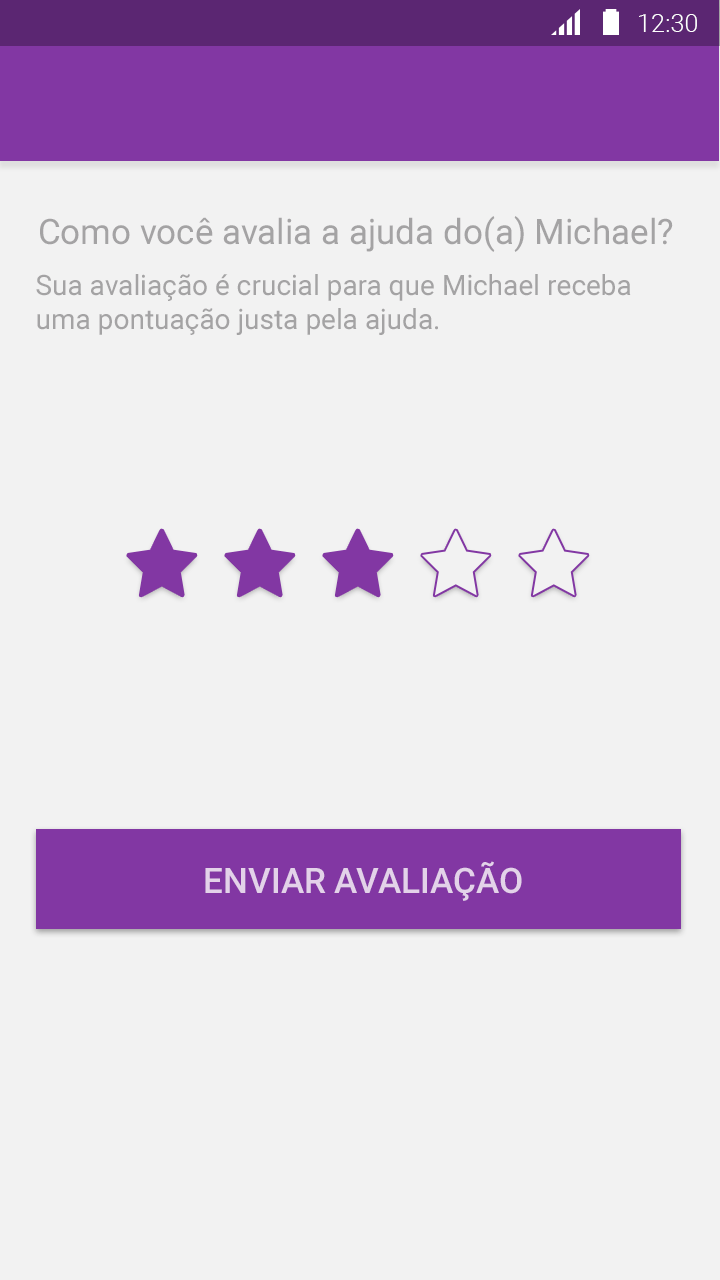
<style>
.page{position:relative;width:720px;height:1280px;background:#f2f2f2}
.page>*{position:absolute;margin:0}
.t1{font:25.4px "Roboto-Light";color:#ffffff}
.t2{font:35px "Roboto-Regular";color:#a4a3a4}
.t3{font:28px "Roboto-Regular";color:#a4a3a4}
.t4{font:35px "Roboto-Medium";color:#e3d2e9}
</style>
<div class="page">
<p class="t1" style="left:639px;top:14px;width:58px;height:18px">12:30</p>
<p class="t2" style="left:40px;top:216px;width:633px;height:36px">Como você avalia a ajuda do(a) Michael?</p>
<p class="t3" style="left:36px;top:274px;width:595px;height:61px">Sua avaliação é crucial para que Michael receba <br>uma pontuação justa pela ajuda.</p>
<p class="t4" style="left:205px;top:861px;width:317px;height:40px">ENVIAR AVALIAÇÃO</p>
</div>
